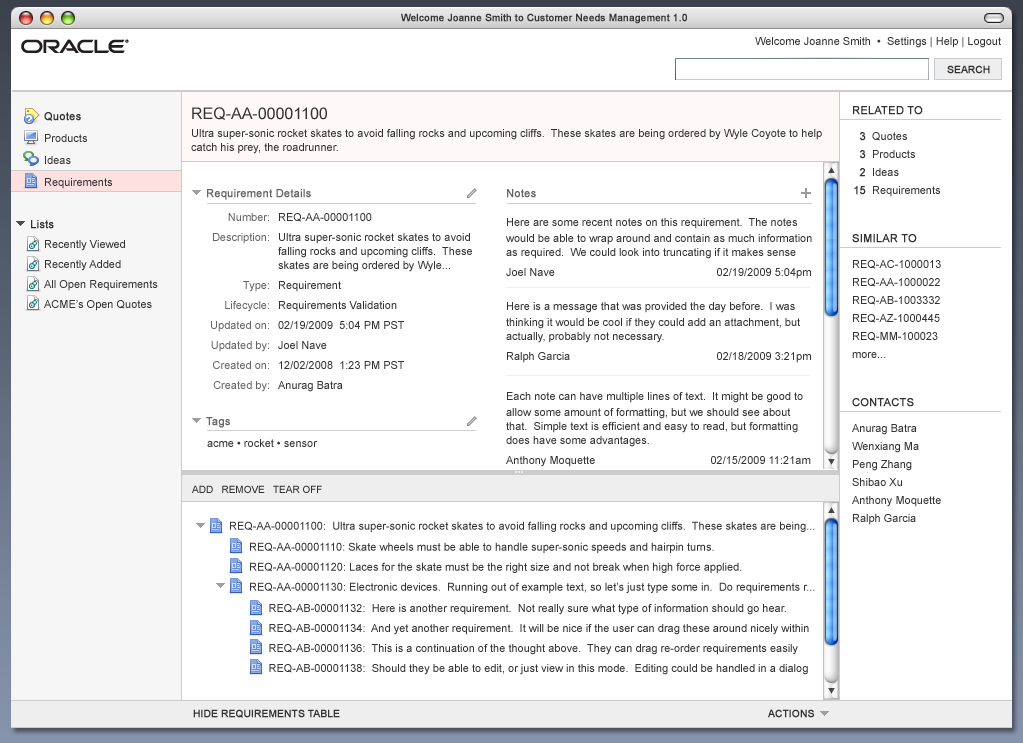
<style>
.page{position:relative;width:1023px;height:743px;background:#ffffff}
.page>*{position:absolute;margin:0}
.t1{font:10px "ArialMT";color:#333333;font-weight:bold}
.t2{font:11px "ArialMT";color:#333333}
.t3{font:11px/22px "ArialMT";color:#333333}
.t4{font:11px/22px "ArialMT";color:#333333;font-weight:bold}
.t5{font:16px "ArialMT";color:#333333}
.t6{font:11px "ArialMT";color:#333333;font-weight:bold}
.t7{font:11px/16px "ArialMT";color:#333333}
.t8{font:11px/14px "ArialMT";color:#333333}
.t9{font:11px/18px "ArialMT";color:#333333;font-weight:bold}
.t10{font:11px/18px "ArialMT";color:#333333}
.t11{font:11px "ArialMT";color:#666666;font-weight:bold}
.t12{font:11px "ArialMT";color:#333333;text-transform:uppercase;font-weight:bold}
.t13{font:11px/20px "ArialMT";color:#666666}
.t14{font:11px/20px "ArialMT";color:#333333}
.t15{font:10px "ArialMT";color:#333333}
.t16{font:10px "ArialMT";color:#333333;text-transform:uppercase;font-weight:bold}
</style>
<div class="page">
<p class="t1" style="left:401px;top:13px;width:286px;height:11px">Welcome Joanne Smith to Customer Needs Management 1.0</p>
<p class="t2" style="left:755px;top:37px;width:246px;height:11px">Welcome Joanne Smith  •  Settings | Help | Logout</p>
<p class="t1" style="left:947px;top:65px;width:43px;height:9px">SEARCH</p>
<p class="t3" style="left:44px;top:112px;width:68px;height:77px"><span class="t4">Quotes<br></span>Products<br>Ideas<br>Requirements</p>
<p class="t5" style="left:192px;top:107px;width:135px;height:13px">REQ-AA-00001100</p>
<p class="t6" style="left:853px;top:106px;width:70px;height:9px">RELATED TO</p>
<p class="t7" style="left:191px;top:129px;width:631px;height:25px">Ultra super-sonic rocket skates to avoid falling rocks and upcoming cliffs.  These skates are being ordered by Wyle Coyote to help<br><span class="t8">catch his prey, the roadrunner.</span></p>
<p class="t9" style="left:854px;top:132px;width:12px;height:63px;text-align:right">3<br>3<br>2<br>15</p>
<p class="t10" style="left:872px;top:132px;width:68px;height:65px">Quotes<br>Products<br>Ideas<br>Requirements</p>
<p class="t11" style="left:207px;top:189px;width:104px;height:11px">Requirement Details</p>
<p class="t11" style="left:507px;top:189px;width:29px;height:9px">Notes</p>
<p class="t6" style="left:31px;top:220px;width:23px;height:9px"><span class="t12">L</span>ists</p>
<p class="t13" style="left:211px;top:213px;width:58px;height:179px;text-align:right">Number:<br>Description:<br><br><br>Type:<br>Lifecycle:<br>Updated on:<br>Updated by:<br>Created on:<br>Created by:</p>
<p class="t14" style="left:278px;top:213px;width:194px;height:179px">REQ-AA-00001100<br>Ultra super-sonic rocket skates to avoid<br><span class="t8">falling rocks and upcoming cliffs.  These<br>skates are being ordered by Wyle...<br></span>Requirement<br>Requirements Validation<br>02/19/2009  5:04 PM PST<br>Joel Nave<br>12/02/2008  1:23 PM PST<br>Anurag Batra</p>
<p class="t8" style="left:506px;top:218px;width:306px;height:61px"><span class="t7">Here are some recent notes on this requirement.  The notes <br>would be </span>able to wrap around and contain as much information <br>as required.  We could look into truncating if it makes sense<br><span class="t14">Joel Nave              02/19/2009 5:04pm</span></p>
<p class="t14" style="left:44px;top:240px;width:114px;height:71px">Recently Viewed<br>Recently Added<br>All Open Requirements<br>ACME’s Open Quotes</p>
<p class="t6" style="left:852px;top:234px;width:65px;height:9px">SIMILAR TO</p>
<p class="t10" style="left:852px;top:260px;width:89px;height:98px">REQ-AC-1000013<br>REQ-AA-1000022<br>REQ-AB-1003332<br>REQ-AZ-1000445<br>REQ-MM-100023<br>more...</p>
<p class="t8" style="left:506px;top:302px;width:305px;height:61px"><span class="t7">Here is a message that was provided the day before.  I was <br>thinking it </span>would be cool if they could add an attachment, but <br>actually, probably not necessary.<br><span class="t14">Ralph Garcia              02/18/2009 3:21pm</span></p>
<p class="t8" style="left:506px;top:392px;width:305px;height:75px"><span class="t7">Each note can have multiple lines of text.  It might be good to <br>allow some amount </span>of formatting, but we should see about <br>that.  Simple text is efficient and easy to read, but formatting <br>does have some advantages.<br><span class="t14">Anthony Moquette           02/15/2009 11:21am</span></p>
<p class="t12" style="left:852px;top:398px;width:62px;height:9px">contacts</p>
<p class="t11" style="left:206px;top:417px;width:24px;height:11px">Tags</p>
<p class="t10" style="left:852px;top:424px;width:89px;height:101px">Anurag Batra<br>Wenxiang Ma<br>Peng Zhang<br>Shibao Xu<br>Anthony Moquette<br>Ralph Garcia</p>
<p class="t2" style="left:207px;top:439px;width:111px;height:8px">acme • rocket • sensor</p>
<p class="t15" style="left:192px;top:485px;width:130px;height:8px">ADD   REMOVE   TEAR OFF</p>
<p class="t2" style="left:230px;top:521px;width:585px;height:11px">REQ-AA-00001100:  Ultra super-sonic rocket skates to avoid falling rocks and upcoming cliffs.  These skates are being...</p>
<p class="t14" style="left:250px;top:542px;width:565px;height:51px">REQ-AA-00001110: Skate wheels must be able to handle super-sonic speeds and hairpin turns. <br>REQ-AA-00001120: Laces for the skate must be the right size and not break when high force applied. <br>REQ-AA-00001130: Electronic devices.  Running out of example text, so let’s just type some in.  Do requirements r...</p>
<p class="t14" style="left:269px;top:604px;width:540px;height:71px">REQ-AB-00001132:  Here is another requirement.  Not really sure what type of information should go hear.<br>REQ-AB-00001134:  And yet another requirement.  It will be nice if the user can drag these around nicely within<br>REQ-AB-00001136:  This is a continuation of the thought above.  They can drag re-order requirements easily<br>REQ-AB-00001138:  Should they be able to edit, or just view in this mode.  Editing could be handled in a dialog</p>
<p class="t16" style="left:193px;top:709px;width:147px;height:9px">Hide Requirements Table</p>
<p class="t16" style="left:768px;top:709px;width:46px;height:9px">actions</p>
</div>
